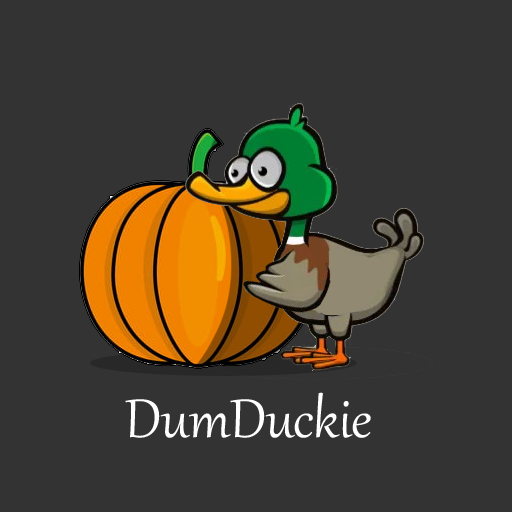
<style>
.page{position:relative;width:512px;height:512px;background:#333333}
.page>*{position:absolute;margin:0}
.t1{font:66.7px "Gabriola";letter-spacing:-0.004em;color:#ffffff}
</style>
<div class="page">
<p class="t1" style="left:125px;top:392px;width:246px;height:46px">DumDuckie</p>
</div>
